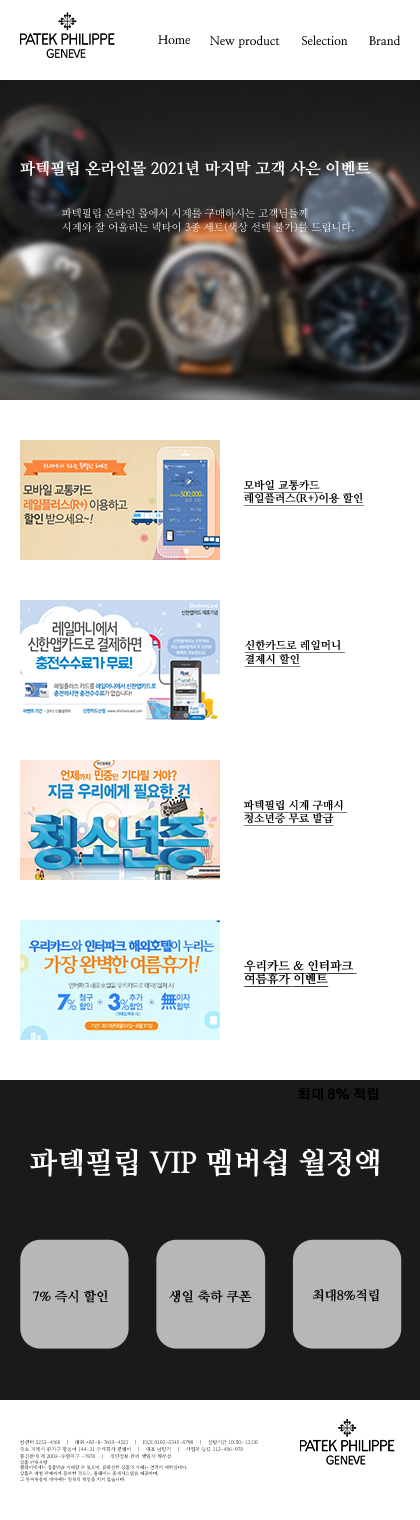
<style>
.page{position:relative;width:420px;height:1520px;background:#ffffff}
.page>*{position:absolute;margin:0}
.t1{font:12px "NanumMyeongjoBold";color:#000000}
.t2{font:15.9px "NanumMyeongjoExtraBold";color:#fffefe}
.t3{font:10.6px/14.1px "NanumMyeongjo";color:#f4f2f2}
.t4{font:10.9px/13.1px "NanumMyeongjoExtraBold";color:#000000;text-decoration:underline}
.t5{font:12px/13.1px "NanumMyeongjoExtraBold";color:#000000;text-decoration:underline}
.t6{font:13.1px "GothicA1-Black";color:#000000}
.t7{font:29.4px "NanumMyeongjoExtraBold";color:#ffffff}
.t8{font:13.1px "NanumMyeongjoExtraBold";color:#000000}
.t9{font:5px/6.7px "NanumMyeongjo"}
.t10{font:4.6px/5.8px "NanumMyeongjo"}
</style>
<div class="page">
<p class="t1" style="left:158px;top:35px;width:33px;height:10px">Home</p>
<p class="t1" style="left:209px;top:35px;width:71px;height:13px">New product</p>
<p class="t1" style="left:301px;top:35px;width:47px;height:11px">Selection</p>
<p class="t1" style="left:369px;top:35px;width:32px;height:11px">Brand</p>
<p class="t2" style="left:20px;top:160px;width:351px;height:17px">파텍필립 온라인몰 2021년 마지막 고객 사은 이벤트</p>
<p class="t3" style="left:62px;top:208px;width:292px;height:25px">파텍필립 온라인 몰에서 시계를 구매하시는 고객님들께<br>시계와 잘 어울리는 넥타이 3종 세트(색상 선택 불가)를 드립니다.</p>
<p class="t4" style="left:243px;top:479px;width:121px;height:27px">모바일 교통카드 <br>레일플러스(R+)이용 할인</p>
<p class="t4" style="left:244px;top:639px;width:101px;height:28px">신한카드로 레일머니 <br>결제시 할인</p>
<p class="t4" style="left:243px;top:799px;width:105px;height:27px">파텍필립 시계 구매시 <br>청소년증 무료 발급</p>
<p class="t5" style="left:244px;top:959px;width:113px;height:28px">우리카드 &amp; 인터파크 <br>여름휴가 이벤트</p>
<p class="t6" style="left:298px;top:1087px;width:80px;height:14px">최대 8% 적립</p>
<p class="t7" style="left:29px;top:1148px;width:350px;height:29px">파텍필립 VIP 멤버쉽 월정액</p>
<p class="t8" style="left:312px;top:1289px;width:67px;height:13px">최대8%적립</p>
<p class="t8" style="left:32px;top:1290px;width:76px;height:13px">7% 즉시 할인</p>
<p class="t8" style="left:169px;top:1290px;width:83px;height:13px">생일 축하 쿠폰</p>
<p class="t9" style="left:19px;top:1439px;width:239px;height:43px">콜센터 1233-4566    |    해외 +82-8-7655-4321    |    FAX 0102-0345-6798    |    상담시간 10:00~13:00   <br>주소 지레시 환기구 망동어 144-31 주식회사 필웨이    |    대표 남망기    |    사업자 등록 312-456-978<br>통신판매 제 2003-수염미구 -7878    |    개인정보 관리 책임자 위무선<br><span class="t10">상품 안내사항<br>필웨이에서는 정품만을 거래할 수 있으며, 불확실한 상품의 거래는 엄격히 제한됩니다. <br>상품은 개별 판매자가 등록한 것으로, 필웨이는 중개시스템을 제공하며, <br>그 등록내용에 대하여는 일체의 책임을 지지 않습니다.</span></p>
</div>
